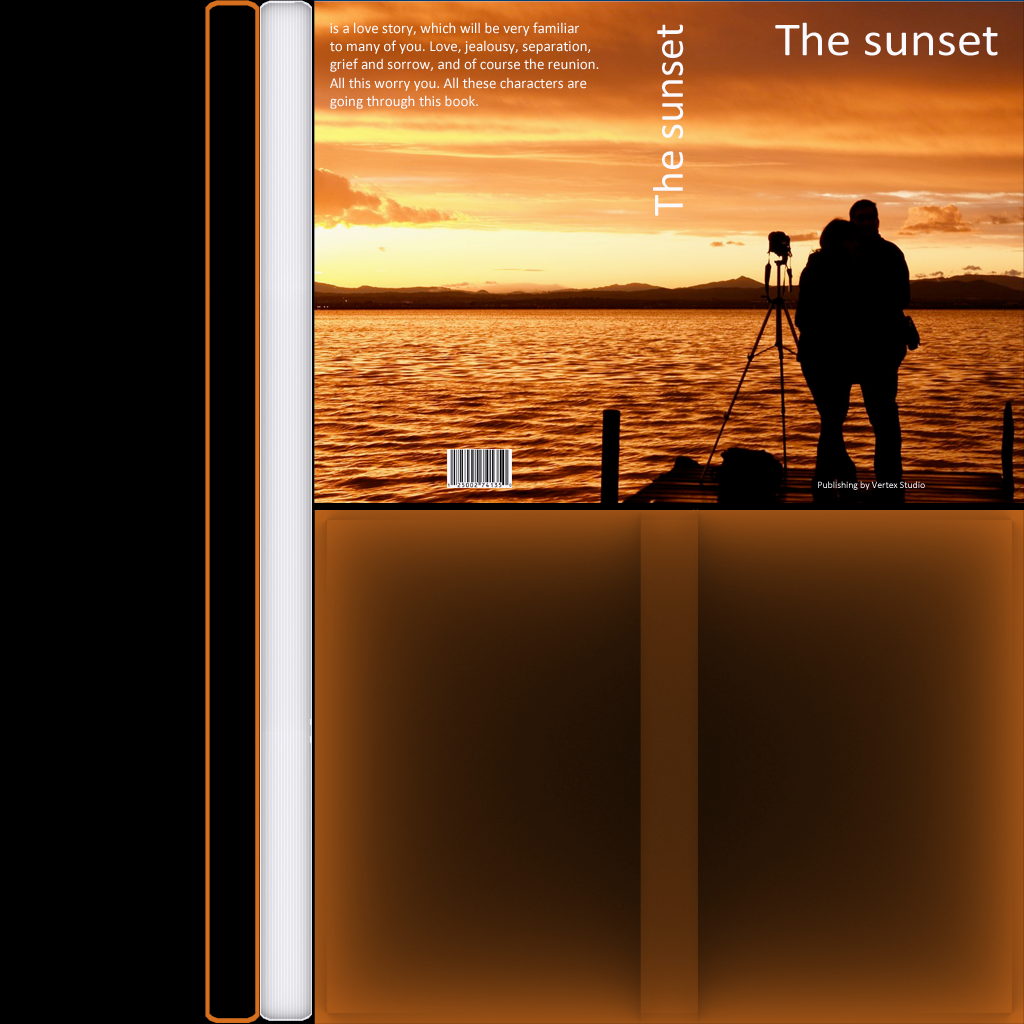
<style>
.page{position:relative;width:1024px;height:1024px;background:#000000}
.page>*{position:absolute;margin:0}
.t1{font:15px "Calibri";color:#ffffff}
.t2{font:43.8px "Calibri";color:#ffffff}
.t3{font:47.6px "Calibri";color:#ffffff;scale:1.07 1}
.t4{font:9.7px "Calibri";color:#ffffff}
</style>
<div class="page">
<p class="t1" style="left:330px;top:22px;width:269px;height:87px">is a love story, which will be very familiar <br>to many of you. Love, jealousy, separation, <br>grief and sorrow, and of course the reunion. <br>All this worry you. All these characters are <br>going through this book.</p>
<p class="t2" style="left:653px;top:24px;width:31px;height:192px;rotate:-90deg">The sunset</p>
<p class="t3" style="left:775px;top:22px;width:223px;height:34px">The sunset</p>
<p class="t4" style="left:818px;top:481px;width:107px;height:9px">Publishing by Vertex Studio</p>
</div>
